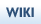
<style>
.page{position:relative;width:41px;height:24px}
.page>*{position:absolute;margin:0}
.t1{font:14px "Humanist521BT-BoldCondensed";color:#2d5078}
</style>
<div class="page">
<p class="t1" style="left:6px;top:7px;width:28px;height:11px">WIKI</p>
</div>
